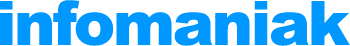
<style>
.page{position:relative;width:350px;height:46px;background:#0098ff}
.page>*{position:absolute;margin:0}
.t1{font:61.1px "Arial-Black";letter-spacing:-0.04em;color:#0098ff}
</style>
<div class="page">
<p class="t1" style="left:0px;top:0px;width:350px;height:46px">infomaniak</p>
</div>
